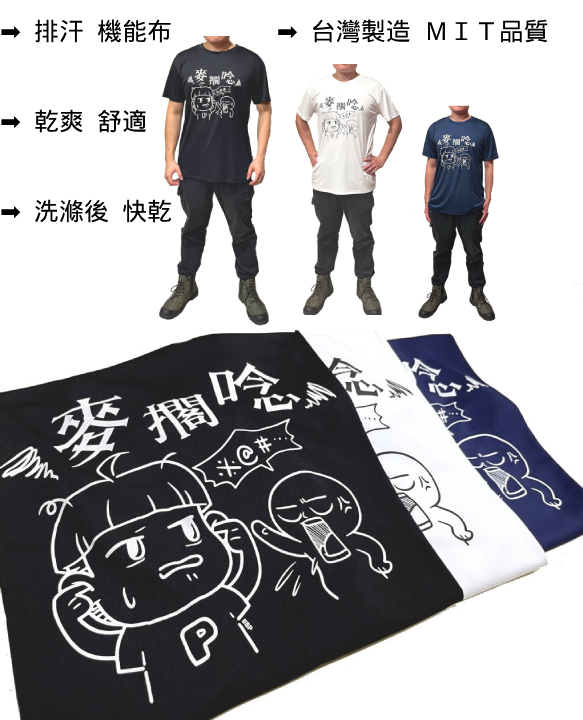
<style>
.page{position:relative;width:583px;height:720px;background:#ffffff}
.page>*{position:absolute;margin:0}
.t1{font:25px "DroidSansFallback";color:#000000}
.t2{font:25px "DejaVuSans";color:#000000}
</style>
<div class="page">
<p class="t1" style="left:1px;top:19px;width:547px;height:204px"><span class="t2">➡️  </span>排汗  機能布                <span class="t2">➡️</span>  台灣製造  ＭＩＴ品質<br><br><br><span class="t2">➡️</span>  乾爽  舒適<br><br><br><span class="t2">➡️</span>  洗滌後  快乾</p>
</div>
